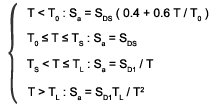
<style>
.page{position:relative;width:215px;height:110px;background:#ffffff}
.page>*{position:absolute;margin:0}
.t1{font:120px "NuevaStd-Cond";color:#333333;scale:0.35 1}
.t2{font:12px "ArialMT";color:#000000}
</style>
<div class="page">
<p class="t1" style="left:8px;top:2px;width:10px;height:102px">{</p>
<p class="t2" style="left:27px;top:8px;width:182px;height:14px">T &lt; T0 : Sa = SDS ( 0.4 + 0.6 T / T0 )</p>
<p class="t2" style="left:27px;top:33px;width:110px;height:14px">T0 ≤ T ≤ TS : Sa = SDS</p>
<p class="t2" style="left:27px;top:59px;width:127px;height:14px">TS &lt; T ≤ TL : Sa = SD1 / T</p>
<p class="t2" style="left:28px;top:86px;width:116px;height:15px">T &gt; TL : Sa = SD1TL / T2</p>
</div>
